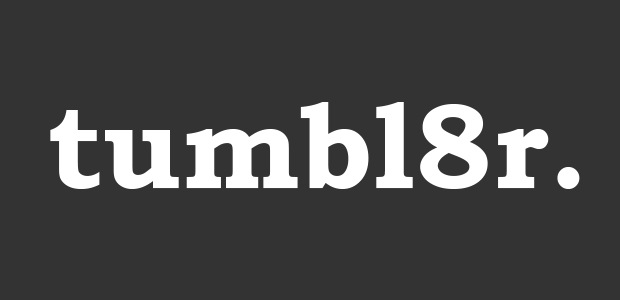
<style>
.page{position:relative;width:620px;height:300px;background:#333333}
.page>*{position:absolute;margin:0}
.t1{font:120px "BookmanOldStyle-Bold";color:#ffffff}
</style>
<div class="page">
<p class="t1" style="left:50px;top:102px;width:530px;height:87px">tumbl8r.</p>
</div>
